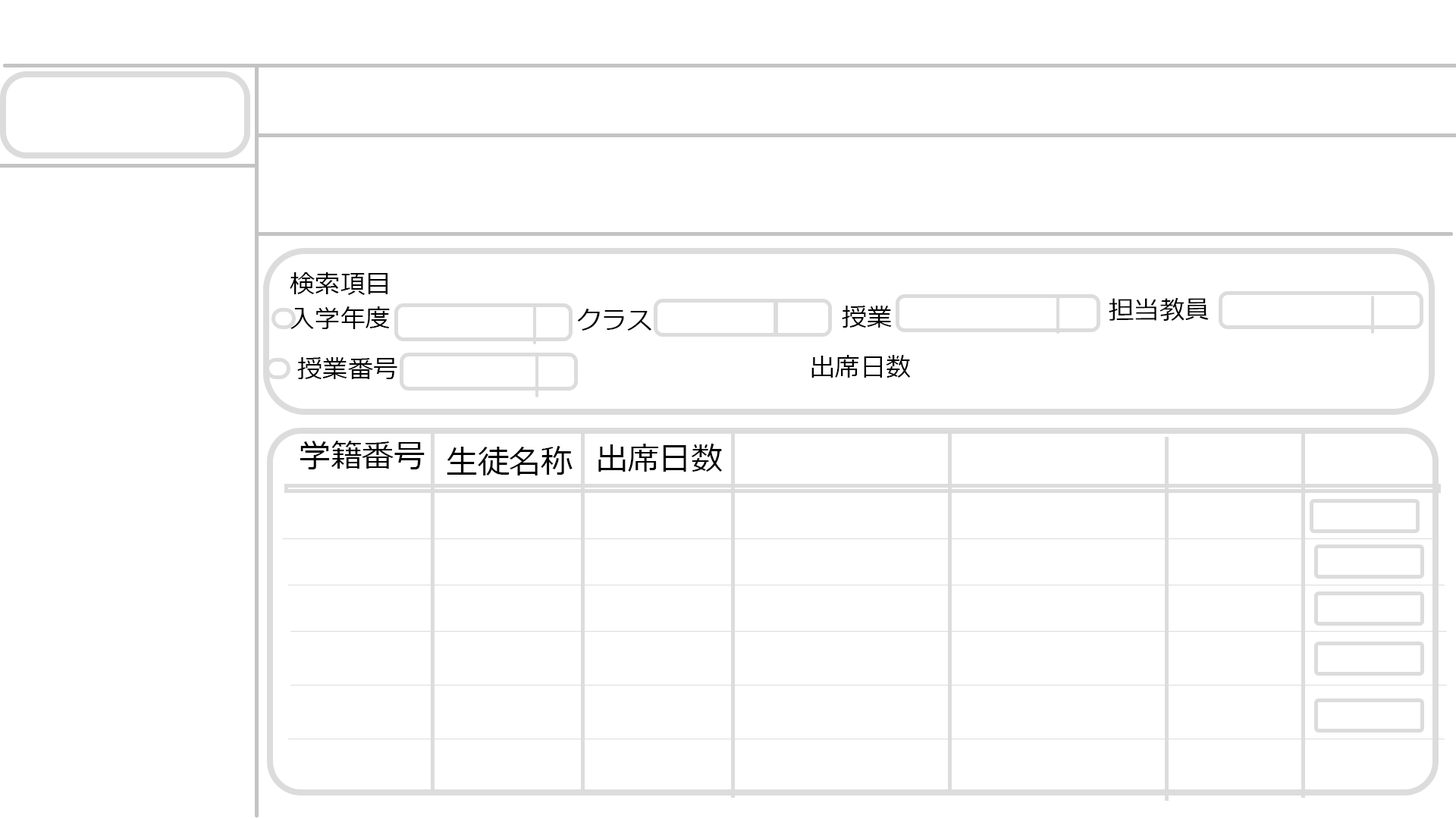
<style>
.page{position:relative;width:1456px;height:819px;background:#ffffff}
.page>*{position:absolute;margin:0}
.t1{font:25.3px "Meiryo";color:#000000}
.t2{font:31.6px "Meiryo";color:#000000}
</style>
<div class="page">
<p class="t1" style="left:290px;top:272px;width:98px;height:23px">検索項目</p>
<p class="t1" style="left:842px;top:306px;width:50px;height:22px">授業</p>
<p class="t1" style="left:1109px;top:297px;width:100px;height:24px;rotate:-1deg">担当教員</p>
<p class="t1" style="left:290px;top:306px;width:100px;height:23px">入学年度</p>
<p class="t1" style="left:577px;top:309px;width:74px;height:22px">クラス</p>
<p class="t1" style="left:297px;top:357px;width:100px;height:22px">授業番号</p>
<p class="t1" style="left:811px;top:355px;width:100px;height:23px">出席日数</p>
<p class="t2" style="left:300px;top:441px;width:125px;height:28px">学籍番号</p>
<p class="t2" style="left:447px;top:446px;width:126px;height:29px">生徒名称</p>
<p class="t2" style="left:598px;top:444px;width:125px;height:28px">出席日数</p>
</div>
